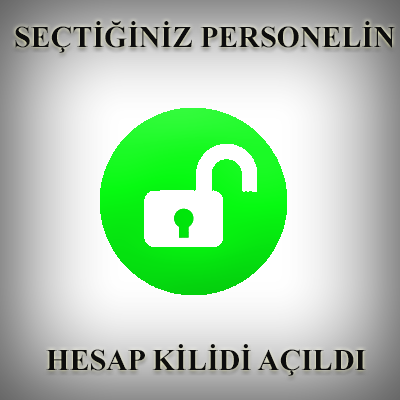
<style>
.page{position:relative;width:400px;height:400px}
.page>*{position:absolute;margin:0}
.t1{font:30px "TimesNewRomanPS-BoldMT";color:#0d0d0d}
</style>
<div class="page">
<p class="t1" style="left:15px;top:21px;width:380px;height:32px">SEÇTİĞİNİZ PERSONELİN</p>
<p class="t1" style="left:46px;top:344px;width:320px;height:32px">HESAP KİLİDİ AÇILDI</p>
</div>
